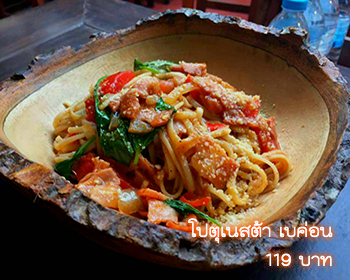
<style>
.page{position:relative;width:350px;height:280px}
.page>*{position:absolute;margin:0}
.t1{font:24px "THKodchasal";color:#ffffff}
</style>
<div class="page">
<p class="t1" style="left:188px;top:218px;width:145px;height:49px">โปตุเนสต้า เบค่อน<br>บาท 119</p>
</div>
